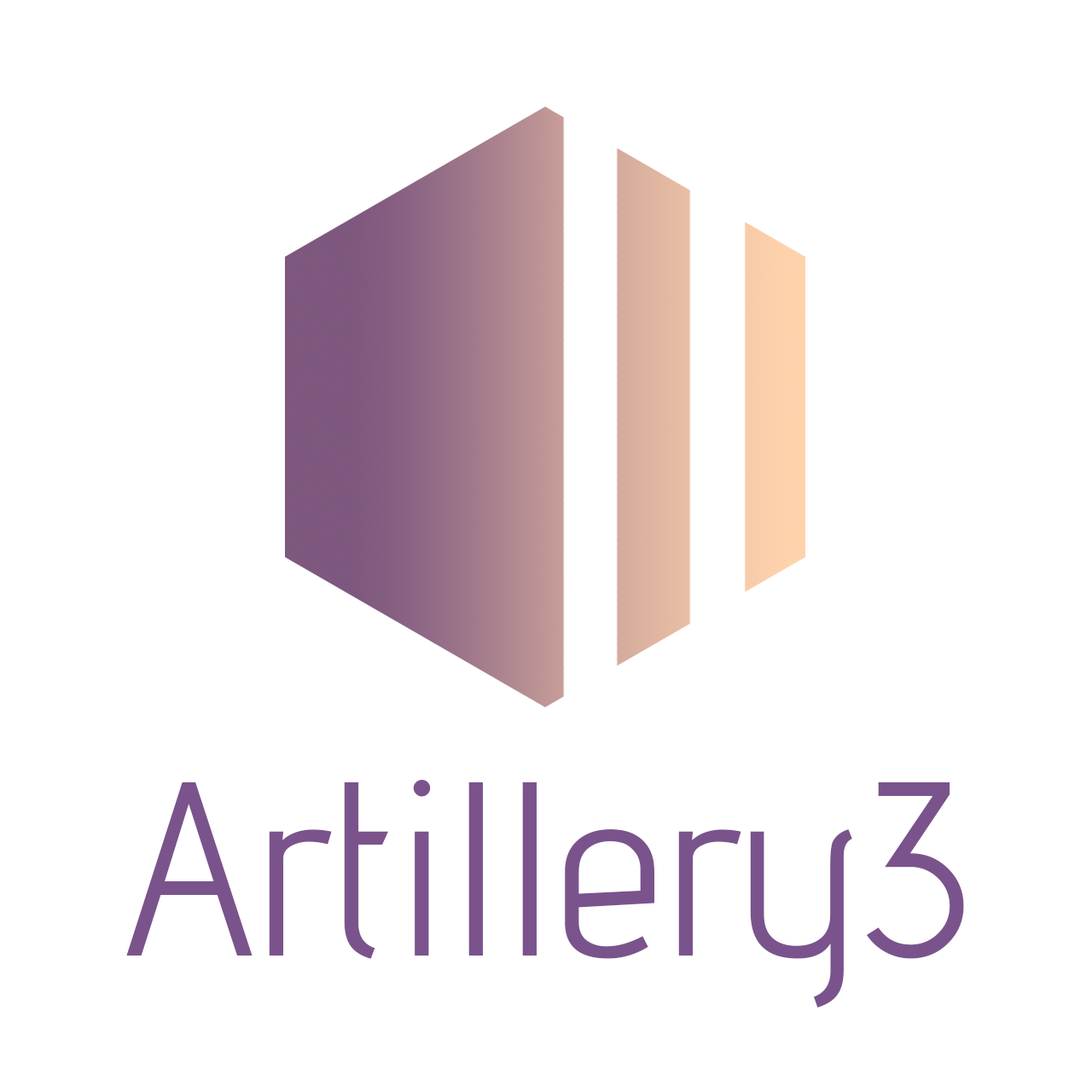
<style>
.page{position:relative;width:1092px;height:1092px;background:#ffffff}
.page>*{position:absolute;margin:0}
.t1{font:247.4px "AdventPro-Regular";color:#7a538c}
</style>
<div class="page">
<p class="t1" style="left:126px;top:780px;width:838px;height:228px">Artillery3</p>
</div>
